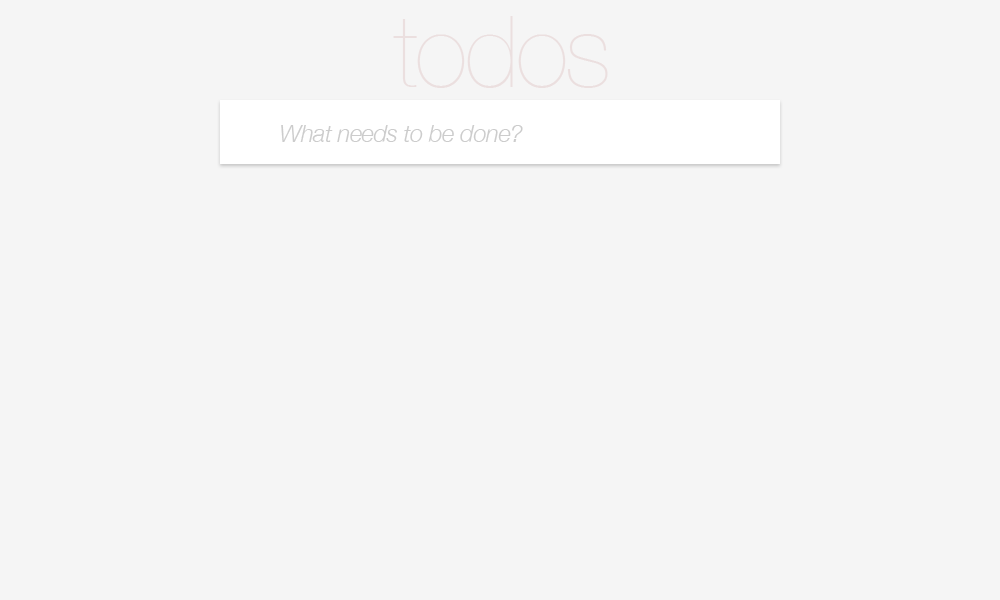
<style>
.page{position:relative;width:1000px;height:600px;background:#f5f5f5}
.page>*{position:absolute;margin:0}
.t1{font:100px "HelveticaNeue-UltraLight";letter-spacing:-0.025em;color:#ebdfdf}
.t2{font:24px "HelveticaNeue-LightItalic";letter-spacing:-0.025em;color:#cccccc}
</style>
<div class="page">
<p class="t1" style="left:393px;top:16px;width:215px;height:72px">todos</p>
<p class="t2" style="left:281px;top:125px;width:242px;height:17px">What needs to be done?</p>
</div>
